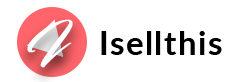
<style>
.page{position:relative;width:250px;height:82px;background:#ffffff}
.page>*{position:absolute;margin:0}
.t1{font:44.1px "Blacksword";letter-spacing:0.04em;color:#ffffff;font-weight:bold}
.t2{font:33.3px "Lato-Bold";letter-spacing:0.04em;color:#000000}
</style>
<div class="page">
<p class="t1" style="left:27px;top:19px;width:46px;height:49px">I</p>
<p class="t2" style="left:101px;top:31px;width:121px;height:24px">Isellthis</p>
</div>
